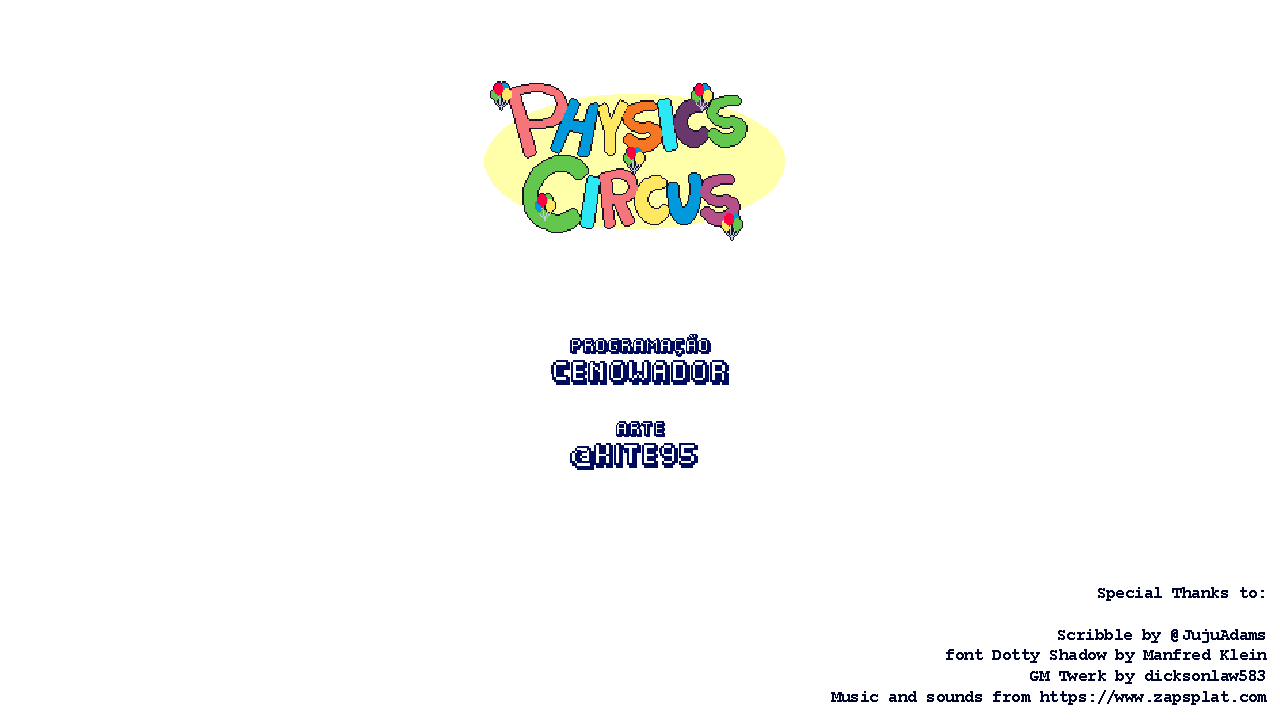
<style>
.page{position:relative;width:1280px;height:720px;background:#ffffff}
.page>*{position:absolute;margin:0}
.t1{font:12.5px "Fipps-Regular";color:#010b5b}
.t2{font:19.5px "Fipps-Regular";color:#010b5b}
.t3{font:17.2px "CourierNewPS-BoldMT"}
.t4{font:17.2px "CourierNewPS-BoldMT";font-weight:bold}
.t5{font:17.2px "CourierNewPS-BoldMT";color:#00052b}
.t6{font:17.2px "CourierNewPS-BoldMT";color:#00052b;font-weight:bold}
</style>
<div class="page">
<p class="t1" style="left:570px;top:334px;width:141px;height:23px">PROGRAMAÇÃO</p>
<p class="t2" style="left:551px;top:360px;width:178px;height:25px">CENOWADOR</p>
<p class="t1" style="left:616px;top:421px;width:49px;height:16px">ARTE</p>
<p class="t2" style="left:570px;top:443px;width:128px;height:27px">@KITE95</p>
<p class="t3" style="left:829px;top:588px;width:437px;height:117px;text-align:right">Special Thanks to:<br><br>Scribble by <span class="t4">@</span>JujuAdams<br>font Dotty Shadow by Manfred Klein<br>GM Twerk by dicksonlaw583<br>Music and sounds from https://www.zapsplat.com</p>
<p class="t3" style="left:831px;top:586px;width:437px;height:118px;text-align:right">Special Thanks to:<br><br>Scribble by <span class="t4">@</span>JujuAdams<br>font Dotty Shadow by Manfred Klein<br>GM Twerk by dicksonlaw583<br>Music and sounds from https://www.zapsplat.com</p>
<p class="t5" style="left:831px;top:587px;width:436px;height:118px;text-align:right">Special Thanks to:<br><br>Scribble by <span class="t6">@</span>JujuAdams<br>font Dotty Shadow by Manfred Klein<br>GM Twerk by dicksonlaw583<br>Music and sounds from https://www.zapsplat.com</p>
<p class="t5" style="left:831px;top:587px;width:436px;height:118px;text-align:right">Special Thanks to:<br><br>Scribble by <span class="t6">@</span>JujuAdams<br>font Dotty Shadow by Manfred Klein<br>GM Twerk by dicksonlaw583<br>Music and sounds from https://www.zapsplat.com</p>
</div>
